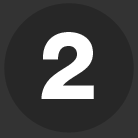
<style>
.page{position:relative;width:138px;height:138px;background:#272727}
.page>*{position:absolute;margin:0}
.t1{font:94px "HelveticaNeueLTStd-Hv";color:#ffffff}
</style>
<div class="page">
<p class="t1" style="left:41px;top:32px;width:53px;height:67px">2</p>
</div>
